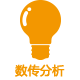
<style>
.page{position:relative;width:80px;height:80px;background:#ffffff}
.page>*{position:absolute;margin:0}
.t1{font:12px "MicrosoftYaHei";color:#f39800;font-weight:bold}
</style>
<div class="page">
<p class="t1" style="left:15px;top:64px;width:50px;height:13px">数传分析</p>
</div>
